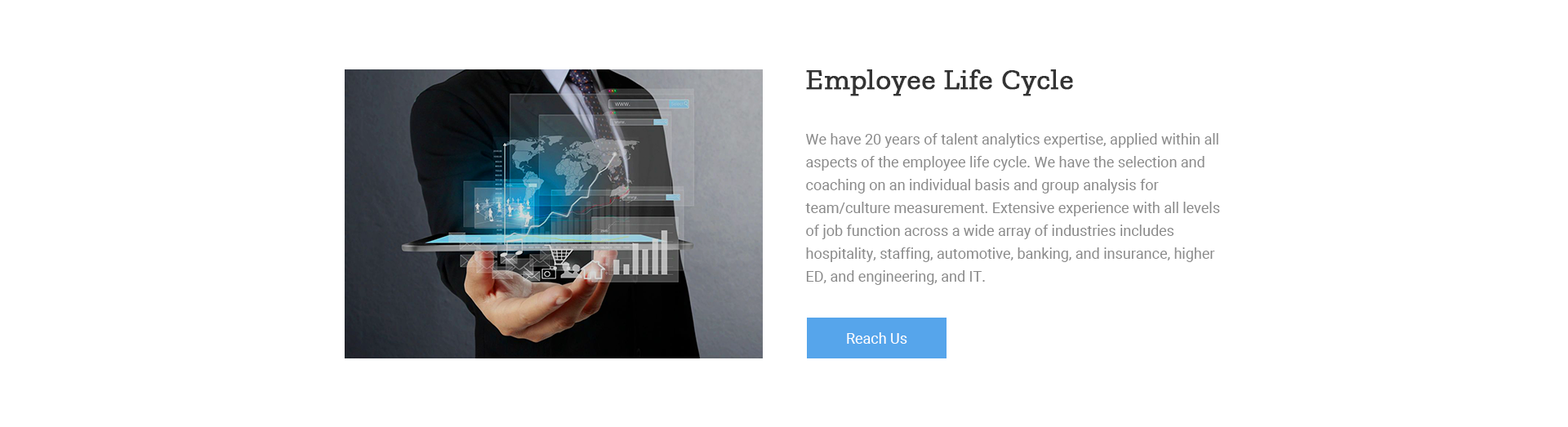
<style>
.page{position:relative;width:1568px;height:427px;background:#ffffff}
.page>*{position:absolute;margin:0}
.t1{font:29.4px "ZillaSlab-Regular";color:#333333;font-weight:bold}
.t2{font:14.7px/22.9px "Roboto-Regular";color:#8a8a8a}
.t3{font:14.7px "Roboto-Regular";color:#ffffff}
</style>
<div class="page">
<p class="t1" style="left:806px;top:69px;width:267px;height:27px">Employee Life Cycle</p>
<p class="t2" style="left:805px;top:133px;width:415px;height:152px">We have 20 years of talent analytics expertise, applied within all aspects of the employee life cycle. We have the selection and coaching on an individual basis and group analysis for team/culture measurement. Extensive experience with all levels of job function across a wide array of industries includes hospitality, staffing, automotive, banking, and insurance, higher ED, and engineering, and IT.</p>
<p class="t3" style="left:847px;top:332px;width:60px;height:12px">Reach Us</p>
</div>
